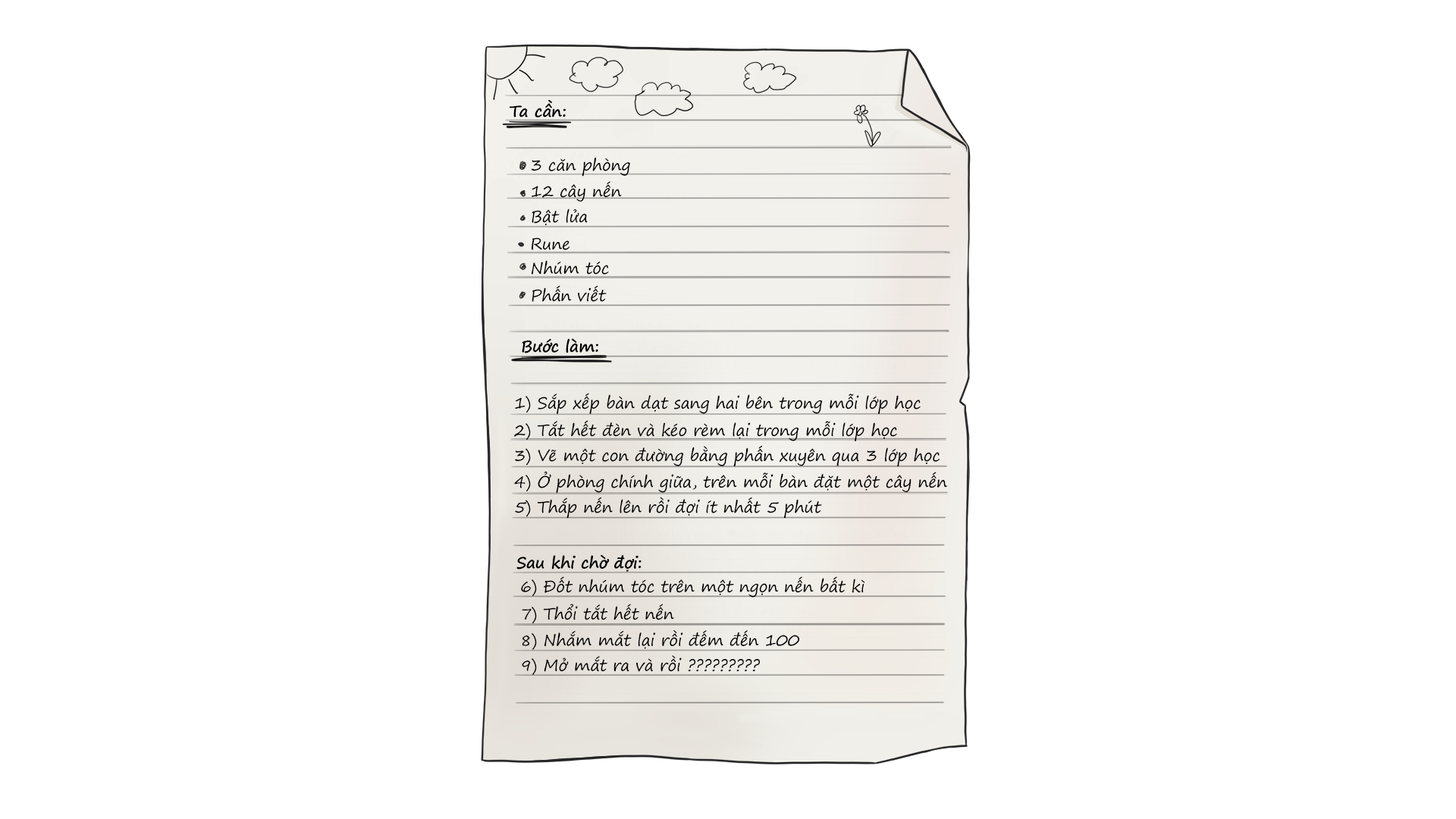
<style>
.page{position:relative;width:1456px;height:819px;background:#ffffff}
.page>*{position:absolute;margin:0}
.t1{font:16.2px "SVN-SegoePrint";letter-spacing:-0.015em;font-weight:bold}
.t2{font:16.2px "SegoePrint-Bold";letter-spacing:-0.015em;color:#000000}
.t3{font:16.2px "SVN-SegoePrint";letter-spacing:-0.017em;color:#000000}
.t4{font:16.2px/26.3px "SVN-SegoePrint";letter-spacing:-0.017em;color:#000000}
.t5{font:16.2px/25.3px "SVN-SegoePrint";letter-spacing:-0.017em;color:#000000}
.t6{font:16.2px/27.3px "SVN-SegoePrint";letter-spacing:-0.017em;color:#000000}
.t7{font:16.2px/24.3px "SVN-SegoePrint";letter-spacing:-0.017em;color:#000000}
.t8{font:16.2px "SVN-SegoePrint";letter-spacing:-0.015em;color:#000000;font-weight:bold}
</style>
<div class="page">
<p class="t1" style="left:544px;top:99px;width:9px;height:17px">ầ</p>
<p class="t2" style="left:509px;top:103px;width:57px;height:15px">Ta cân:</p>
<p class="t3" style="left:532px;top:157px;width:98px;height:145px">3 căn phòng<br><span class="t4">12 cây nến<br></span><span class="t5">Bật lửa<br></span><span class="t6">Rune<br></span><span class="t7">Nhúm tóc<br></span><span class="t6">Phấn viết</span></p>
<p class="t2" style="left:522px;top:338px;width:76px;height:15px">Buóc làm:</p>
<p class="t8" style="left:533px;top:342px;width:20px;height:11px">ươ</p>
<p class="t4" style="left:514px;top:393px;width:433px;height:126px"><span class="t3">1) Sắp xếp bàn dạt sang hai bên trong mỗi lớp học<br></span><span class="t6">2) Tắt hết đèn và kéo rèm lại trong mỗi lớp học<br></span><span class="t5">3) Vẽ một con đường bằng phấn xuyên qua 3 lớp học<br></span>4) Ở phòng chính giữa, trên mỗi bàn đặt một cây nến<br><span class="t5">5) Thắp nến lên rồi đợi ít nhất 5 phút</span></p>
<p class="t2" style="left:516px;top:554px;width:126px;height:16px">Sau khi chò đoi:</p>
<p class="t8" style="left:599px;top:559px;width:36px;height:13px">ơ  ợ</p>
<p class="t3" style="left:521px;top:576px;width:344px;height:99px">6) Đốt nhúm tóc trên một ngọn nến bất kì<br><span class="t6">7) Thổi tắt hết nến<br></span><span class="t4">8) Nhắm mắt lại rồi đếm đến 100<br></span><span class="t5">9) Mở mắt ra và rồi ?????????</span></p>
</div>
